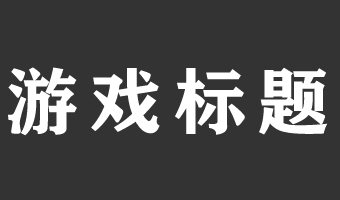
<style>
.page{position:relative;width:340px;height:200px;background:#333333}
.page>*{position:absolute;margin:0}
.t1{font:72px "FZCHSJW--GB1-0";letter-spacing:0.16em;color:#ffffff}
</style>
<div class="page">
<p class="t1" style="left:8px;top:67px;width:320px;height:69px">游戏标题</p>
</div>
